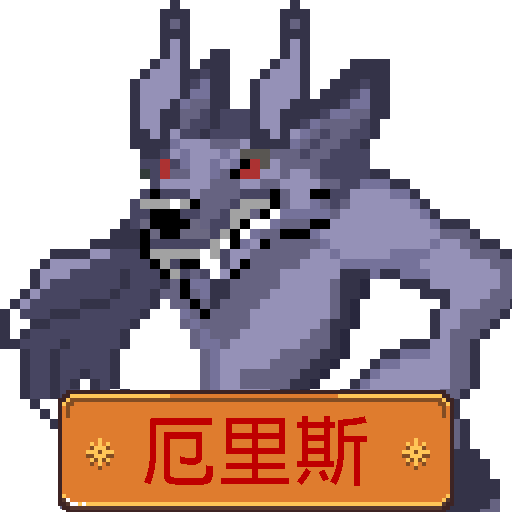
<style>
.page{position:relative;width:512px;height:512px;background:#ffffff}
.page>*{position:absolute;margin:0}
.t1{font:76.2px "AdobeFanHeitiStd-Bold";color:#bf0000}
</style>
<div class="page">
<p class="t1" style="left:144px;top:416px;width:223px;height:70px">厄里斯</p>
</div>
